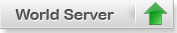
<style>
.page{position:relative;width:177px;height:33px}
.page>*{position:absolute;margin:0}
.t1{font:15.8px "ArialRoundedMTBold";color:#565656}
.t2{font:15.8px "ArialRoundedMTBold"}
</style>
<div class="page">
<p class="t1" style="left:15px;top:9px;width:99px;height:11px">World Server</p>
<p class="t2" style="left:16px;top:10px;width:99px;height:11px">World Server</p>
</div>
